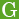
<style>
.page{position:relative;width:19px;height:19px;background:#5ba525}
.page>*{position:absolute;margin:0}
.t1{font:20.8px "CenturySchoolbook";letter-spacing:0.05em;color:#ffffff}
</style>
<div class="page">
<p class="t1" style="left:2px;top:2px;width:16px;height:15px">G</p>
</div>
